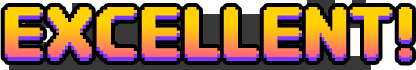
<style>
.page{position:relative;width:416px;height:70px;background:#000000}
.page>*{position:absolute;margin:0}
.t1{font:60px "DNFBitBitv2";text-transform:uppercase}
</style>
<div class="page">
<p class="t1" style="left:4px;top:7px;width:408px;height:55px">Excellent!</p>
</div>
